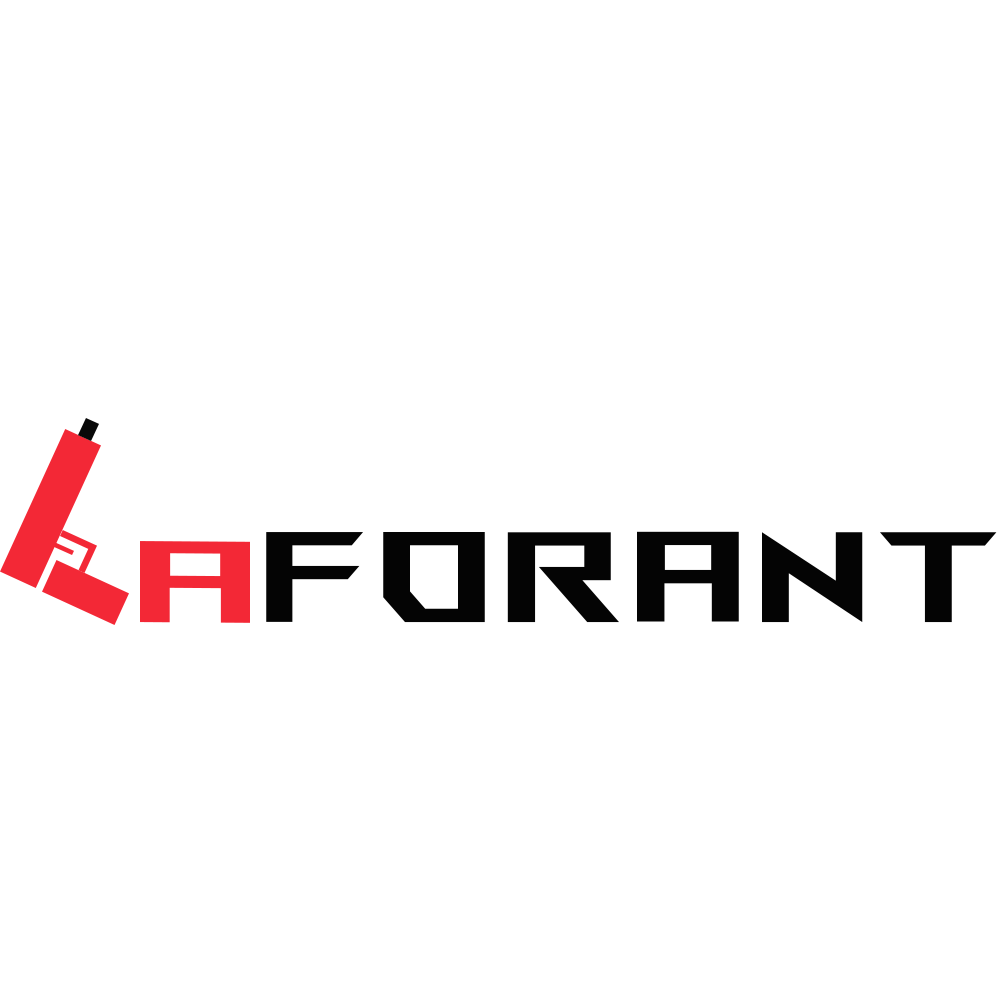
<style>
.page{position:relative;width:1000px;height:1000px;background:#ffffff}
.page>*{position:absolute;margin:0}
.t1{font:128.1px "ROGFonts-Regular";letter-spacing:0.1em;color:#040404}
.t2{font:115.6px "ROGFonts-Regular";letter-spacing:0.1em;color:#f32836;scale:1.2 1}
</style>
<div class="page">
<p class="t1" style="left:266px;top:531px;width:731px;height:92px">Forant</p>
<p class="t2" style="left:140px;top:541px;width:110px;height:82px">a</p>
</div>
